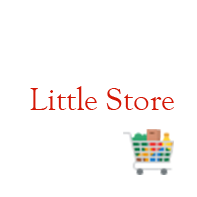
<style>
.page{position:relative;width:197px;height:197px;background:#ffffff}
.page>*{position:absolute;margin:0}
.t1{font:33.3px "GoudyOldStyleT-Regular";color:#d41706}
</style>
<div class="page">
<p class="t1" style="left:30px;top:86px;width:144px;height:24px">Little Store</p>
</div>
